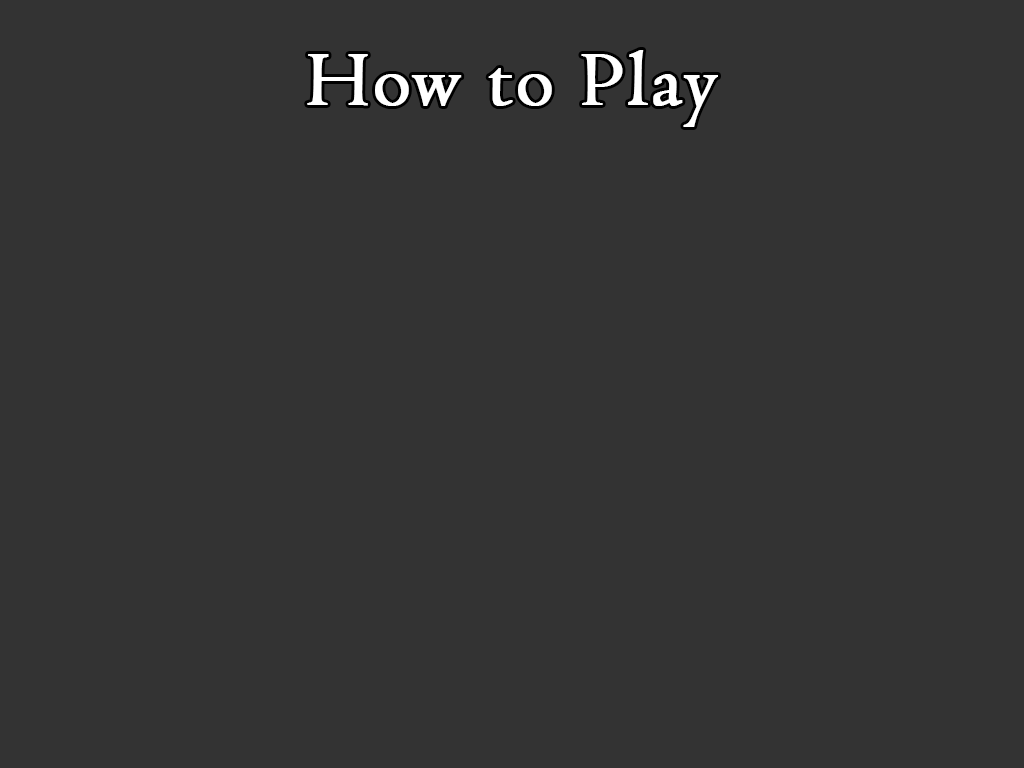
<style>
.page{position:relative;width:1024px;height:768px;background:#333333}
.page>*{position:absolute;margin:0}
.t1{font:80px "Centaur";letter-spacing:0.025em;color:#ffffff;font-weight:bold}
</style>
<div class="page">
<p class="t1" style="left:307px;top:50px;width:411px;height:77px">How to Play</p>
</div>
